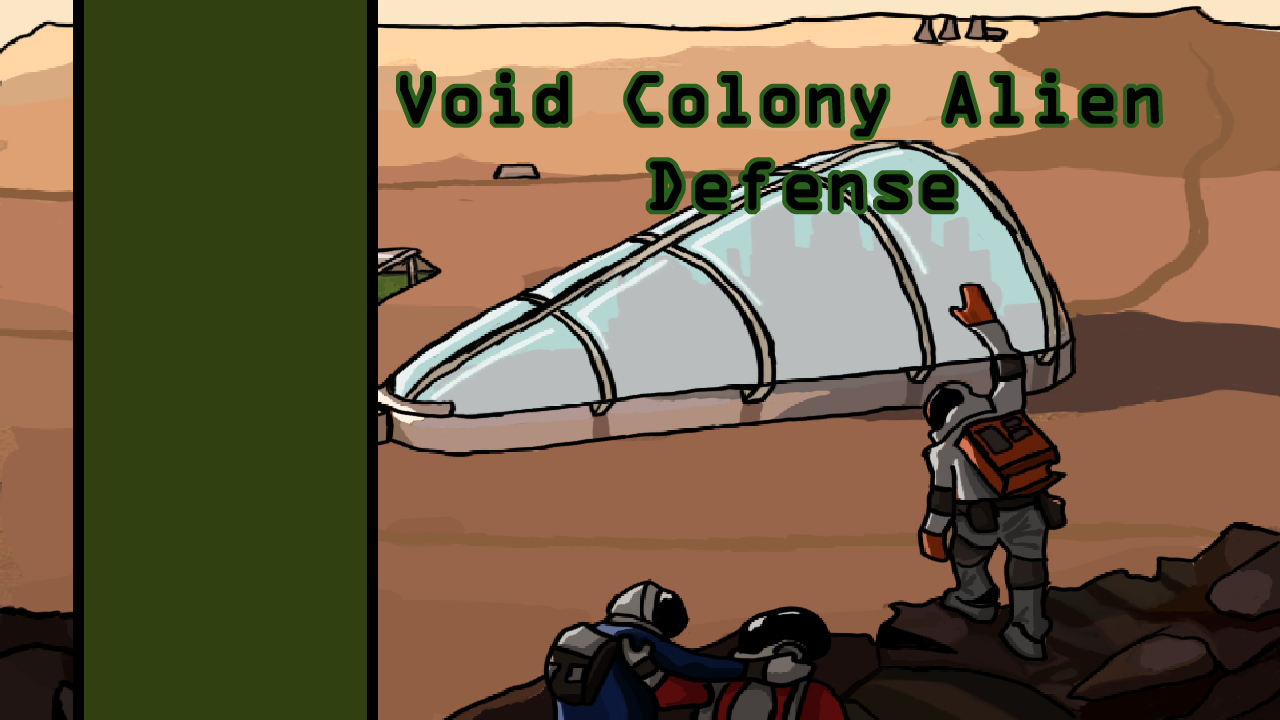
<style>
.page{position:relative;width:1280px;height:720px;background:#314010}
.page>*{position:absolute;margin:0}
.t1{font:72px "OCRAExtended";color:#000000;font-weight:bold}
</style>
<div class="page">
<p class="t1" style="left:400px;top:72px;width:759px;height:139px;text-align:center">Void Colony Alien <br>Defense</p>
</div>
